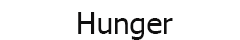
<style>
.page{position:relative;width:240px;height:40px;background:#ffffff}
.page>*{position:absolute;margin:0}
.t1{font:30px "Tahoma";color:#0f0e0e}
</style>
<div class="page">
<p class="t1" style="left:78px;top:12px;width:95px;height:28px">Hunger</p>
</div>
